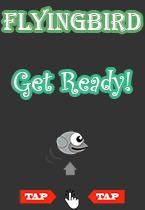
<style>
.page{position:relative;width:145px;height:210px;background:#333333}
.page>*{position:absolute;margin:0}
.t1{font:25px "Algerian";color:#fdfefe}
.t2{font:29.2px "CurlzMT";color:#ffffff}
</style>
<div class="page">
<p class="t1" style="left:3px;top:8px;width:138px;height:24px">flyingBird</p>
<p class="t2" style="left:14px;top:70px;width:116px;height:27px">Get Ready!</p>
</div>
